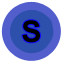
<style>
.page{position:relative;width:64px;height:64px;background:#ffffff}
.page>*{position:absolute;margin:0}
.t1{font:30px "Arial-BoldMT";color:#000000}
</style>
<div class="page">
<p class="t1" style="left:22px;top:20px;width:18px;height:23px">S</p>
</div>
